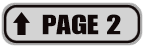
<style>
.page{position:relative;width:144px;height:48px;background:#d3d3d3}
.page>*{position:absolute;margin:0}
.t1{font:27px "Genuine";color:#100808;text-transform:uppercase;scale:1.2 1}
</style>
<div class="page">
<p class="t1" style="left:42px;top:14px;width:79px;height:21px">Page 2</p>
</div>
